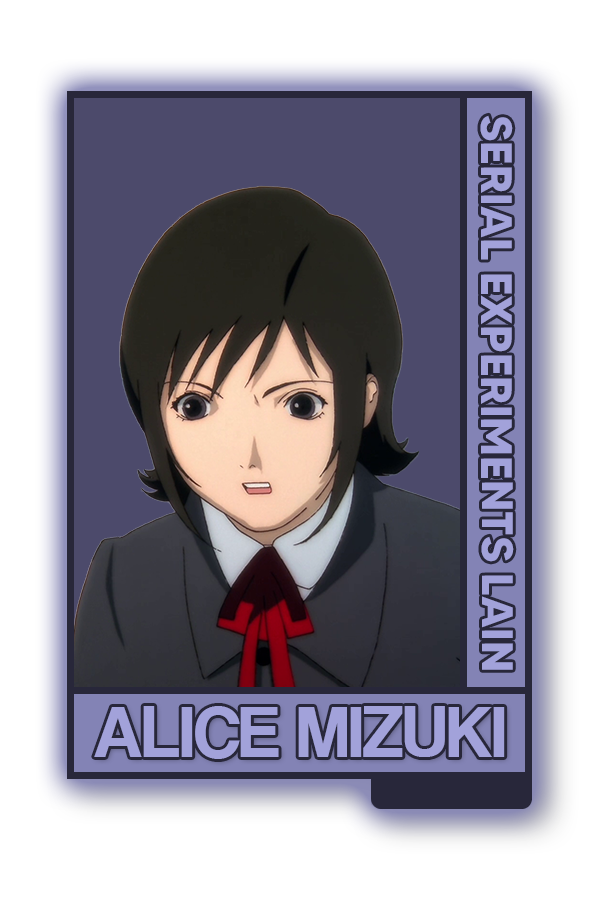
<style>
.page{position:relative;width:600px;height:900px;background:#ffffff}
.page>*{position:absolute;margin:0}
.t1{font:43.8px "MADETOMMY-Bold";color:#a2a2da}
.t2{font:74.8px "CoolveticaRg-Regular";color:#a2a2da}
</style>
<div class="page">
<p class="t1" style="left:480px;top:115px;width:34px;height:555px;rotate:90deg">SERIAL EXPERIMENTS LAIN</p>
<p class="t2" style="left:94px;top:706px;width:411px;height:53px">ALICE MIZUKI</p>
</div>
